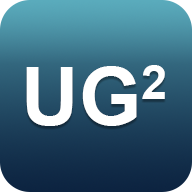
<style>
.page{position:relative;width:192px;height:192px}
.page>*{position:absolute;margin:0}
.t1{font:80px "Arial-BoldMT";color:#ffffff}
</style>
<div class="page">
<p class="t1" style="left:26px;top:65px;width:139px;height:61px">UG2</p>
</div>
